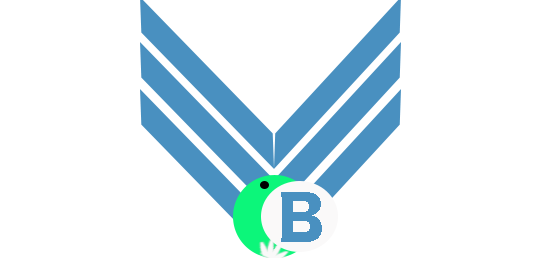
<style>
.page{position:relative;width:540px;height:258px;background:#ffffff}
.page>*{position:absolute;margin:0}
.t1{font:60px "HiraKakuStdN-W8";color:#4990c0}
</style>
<div class="page">
<p class="t1" style="left:281px;top:192px;width:41px;height:50px">B</p>
</div>
